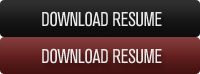
<style>
.page{position:relative;width:200px;height:74px}
.page>*{position:absolute;margin:0}
.t1{font:20px "AkzidenzGroteskBE-Cn";letter-spacing:-0.025em;color:#e9e9e9}
</style>
<div class="page">
<p class="t1" style="left:42px;top:11px;width:120px;height:16px">DOWNLOAD RESUME</p>
<p class="t1" style="left:42px;top:48px;width:120px;height:16px">DOWNLOAD RESUME</p>
</div>
